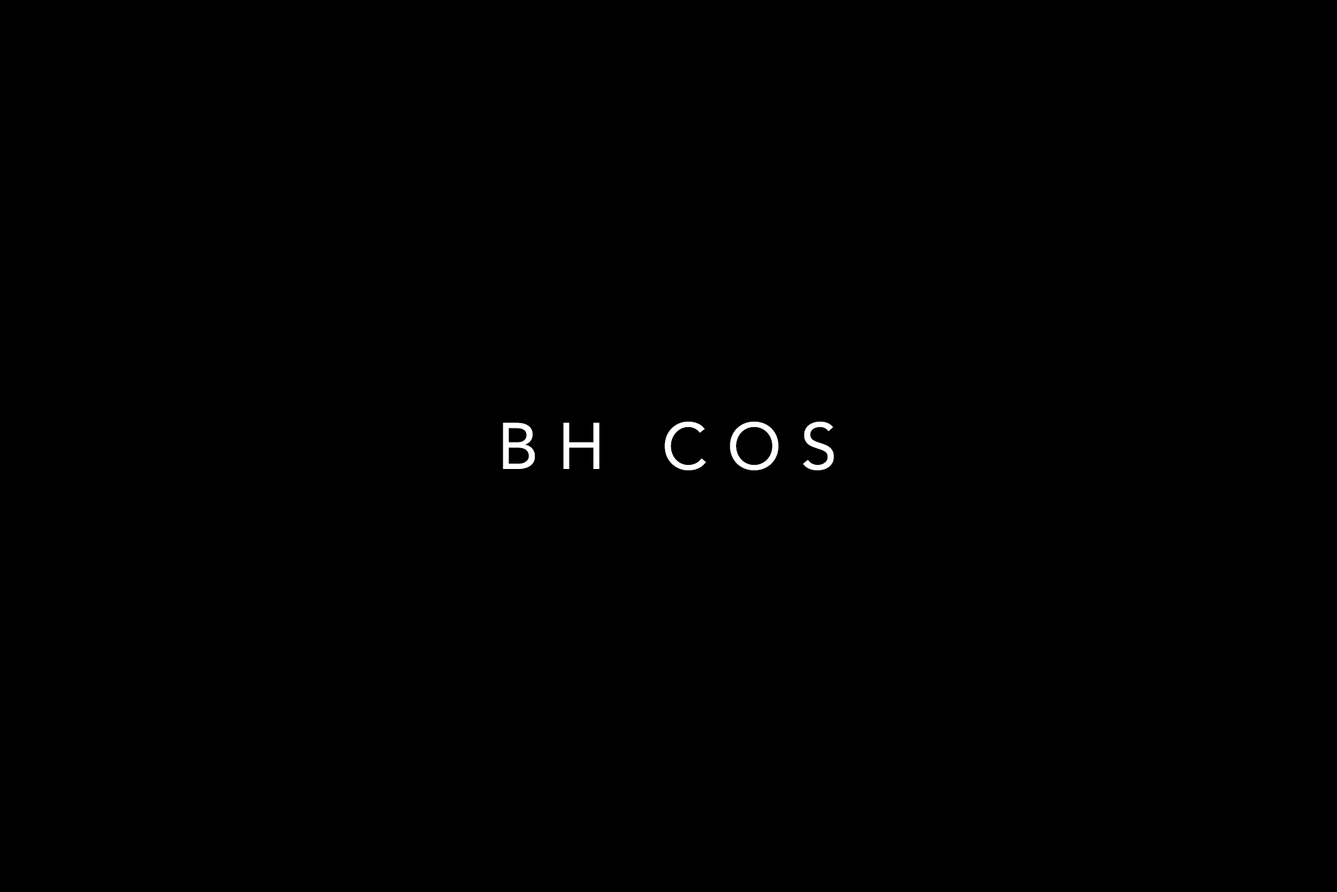
<style>
.page{position:relative;width:1337px;height:892px;background:#000000}
.page>*{position:absolute;margin:0}
.t1{font:65px "Avenir-Roman";letter-spacing:0.3em;color:#ffffff;text-transform:uppercase}
</style>
<div class="page">
<p class="t1" style="left:503px;top:421px;width:331px;height:49px">BH COS</p>
</div>
